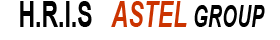
<style>
.page{position:relative;width:280px;height:40px;background:#ffffff}
.page>*{position:absolute;margin:0}
.t1{font:36.5px "Arial-BoldMT";color:#000000;scale:0.63 1}
.t2{font:36.5px "Arial-BoldItalicMT";color:#cc3300;scale:0.63 1}
.t3{font:30.9px "Arial-BoldItalicMT";color:#000000;scale:0.63 1}
</style>
<div class="page">
<p class="t1" style="left:20px;top:1px;width:245px;height:26px">H.R.I.S   <span class="t2">ASTEL </span><span class="t3">GROUP</span></p>
</div>
